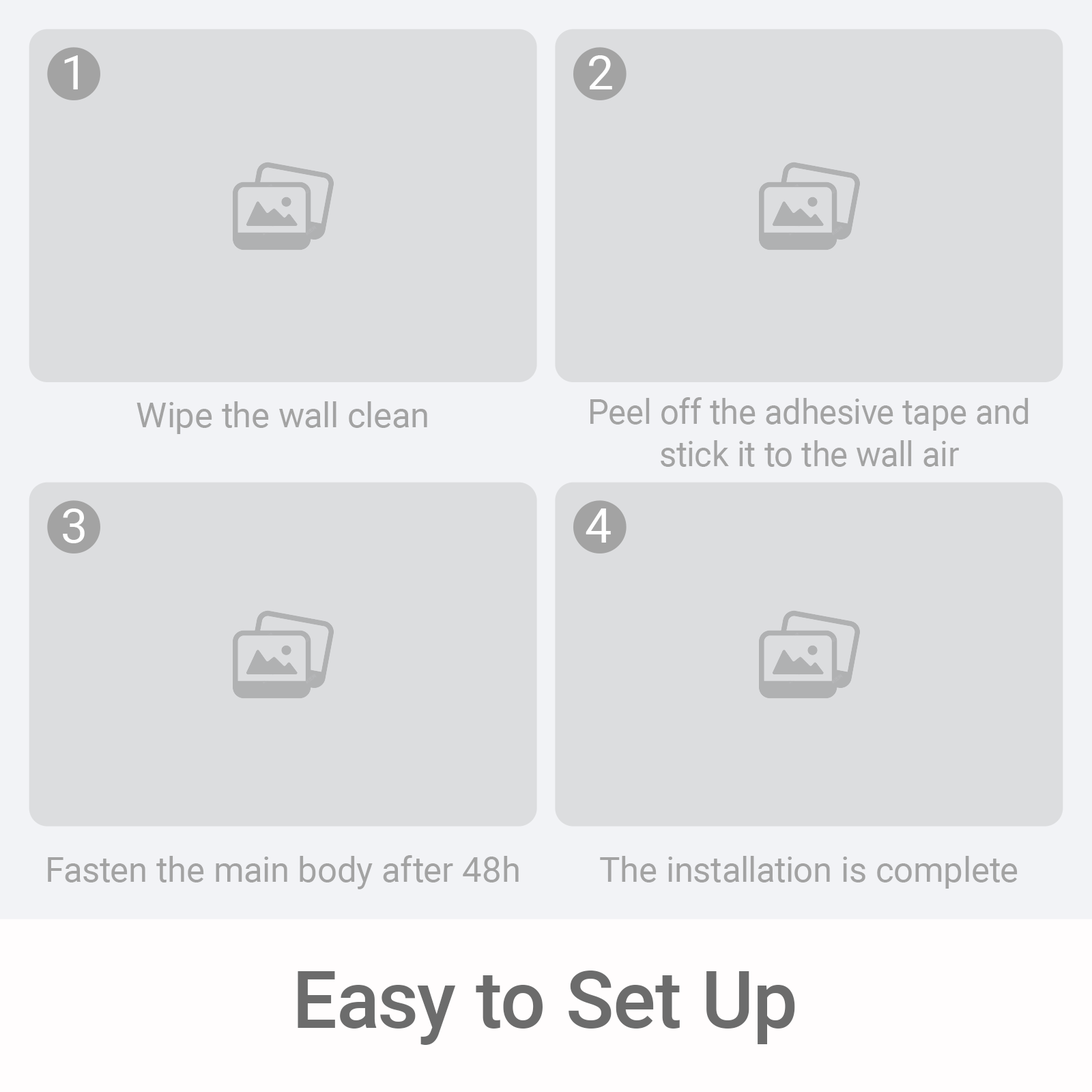
<style>
.page{position:relative;width:1092px;height:1092px;background:#dcdddf}
.page>*{position:absolute;margin:0}
.t1{font:47.9px "Roboto-Regular";color:#ffffff}
.t2{font:34.9px "Roboto-Regular";color:#a3a3a3}
.t3{font:34.9px "Roboto-Regular";color:#a3a3a3;scale:0.96 1}
.t4{font:80.1px "Roboto-Medium";color:#6c6c6c}
</style>
<div class="page">
<p class="t1" style="left:64px;top:55px;width:14px;height:34px">1</p>
<p class="t1" style="left:589px;top:55px;width:23px;height:34px">2</p>
<p class="t2" style="left:136px;top:401px;width:291px;height:33px">Wipe the wall clean</p>
<p class="t3" style="left:590px;top:397px;width:439px;height:70px;text-align:center">Peel off the adhesive tape and stick it to the wall air</p>
<p class="t1" style="left:63px;top:508px;width:22px;height:35px">3</p>
<p class="t1" style="left:586px;top:508px;width:25px;height:35px">4</p>
<p class="t2" style="left:48px;top:855px;width:471px;height:34px">Fasten the main body after 48h</p>
<p class="t2" style="left:600px;top:856px;width:418px;height:33px">The installation is complete</p>
<p class="t4" style="left:298px;top:971px;width:497px;height:74px">Easy to Set Up</p>
</div>
